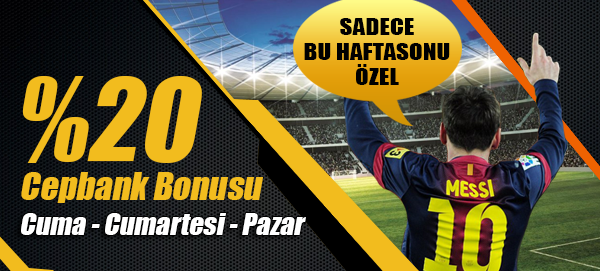
<style>
.page{position:relative;width:600px;height:271px}
.page>*{position:absolute;margin:0}
.t1{font:22.5px/25.1px "Impact";color:#000000;text-transform:uppercase;scale:1.12 1}
.t2{font:105px "Impact";color:#f2bc1e;font-style:italic}
.t3{font:35px "Impact";color:#f2bc1e;font-style:italic}
.t4{font:28px "Impact";color:#ffffff;font-style:italic}
</style>
<div class="page">
<p class="t1" style="left:304px;top:18px;width:146px;height:67px;text-align:center">sadece<br>bu haftasonu<br>özel</p>
<p class="t2" style="left:22px;top:76px;width:180px;height:87px">%20</p>
<p class="t3" style="left:21px;top:172px;width:242px;height:31px">Cepbank Bonusu</p>
<p class="t4" style="left:21px;top:213px;width:285px;height:22px">Cuma - Cumartesi - Pazar</p>
</div>
